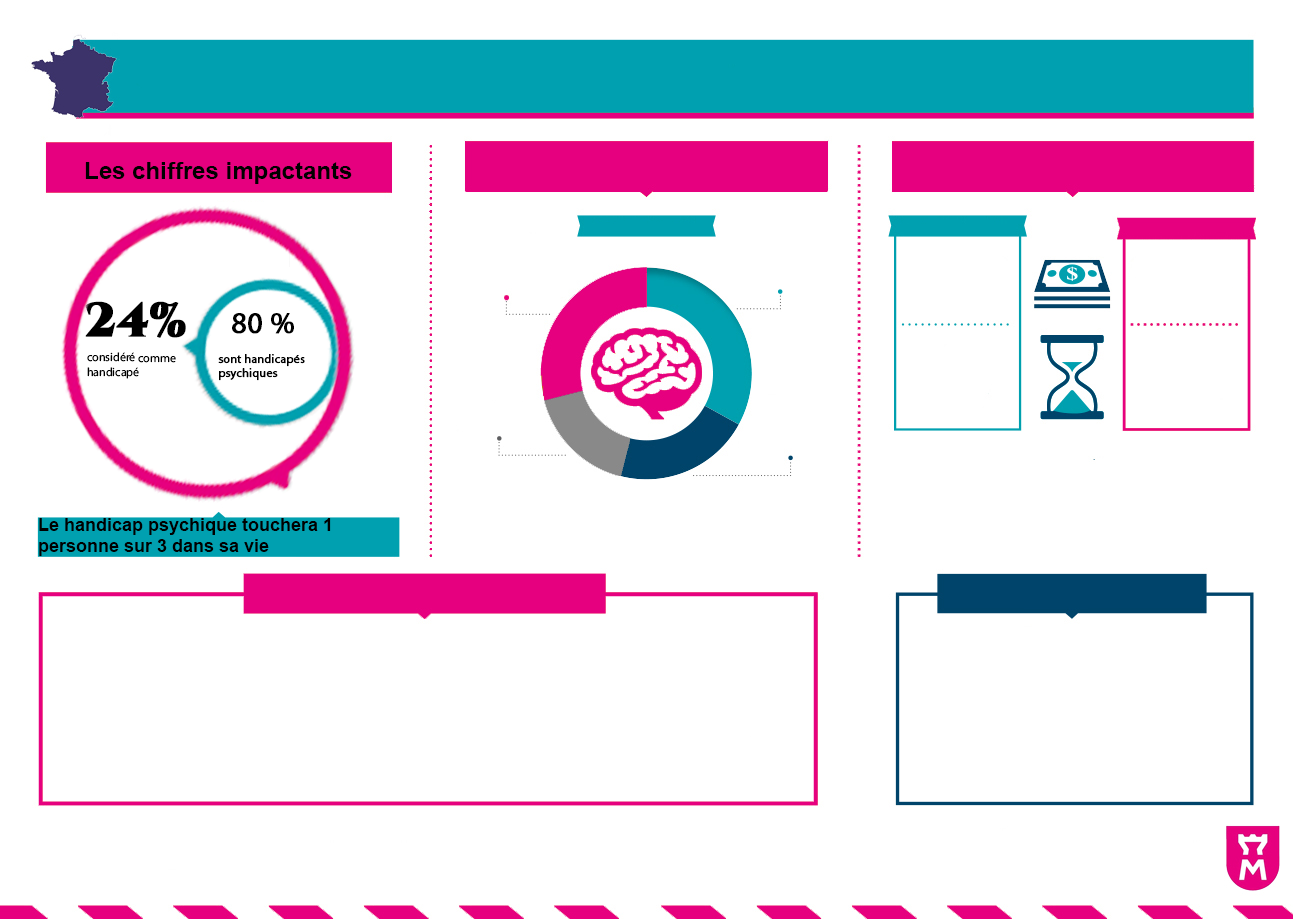
<style>
.page{position:relative;width:1293px;height:919px;background:#ffffff}
.page>*{position:absolute;margin:0}
.t1{font:24px "Arial-BoldMT";color:#000000}
.t2{font:12px "Arial-BoldMT";color:#000000}
.t3{font:48px "Cinzel-Black";color:#000000;font-weight:bold}
.t4{font:30px "MyriadPro-Regular";color:#000000;font-weight:bold}
.t5{font:12px "MyriadPro-Regular";color:#000000}
.t6{font:12px "MyriadPro-Regular";color:#000000;font-weight:bold}
.t7{font:18px "Arial-BoldMT";color:#000000}
</style>
<div class="page">
<p class="t1" style="left:85px;top:162px;width:267px;height:22px"><span class="t2"><br></span>Les chiffres impactants</p>
<p class="t3" style="left:85px;top:301px;width:101px;height:37px">24%</p>
<p class="t4" style="left:232px;top:313px;width:62px;height:21px">80 %</p>
<p class="t5" style="left:87px;top:352px;width:89px;height:27px">considéré comme handicapé</p>
<p class="t6" style="left:218px;top:354px;width:87px;height:27px">sont handicapés psychiques</p>
<p class="t7" style="left:39px;top:518px;width:292px;height:38px">Le handicap psychique touchera 1 personne sur 3 dans sa vie</p>
</div>
